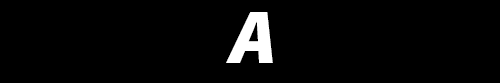
<style>
.page{position:relative;width:500px;height:83px;background:#000000}
.page>*{position:absolute;margin:0}
.t1{font:76px "MyriadPro-BlackIt";color:#ffffff}
</style>
<div class="page">
<p class="t1" style="left:226px;top:12px;width:47px;height:51px">A</p>
</div>
